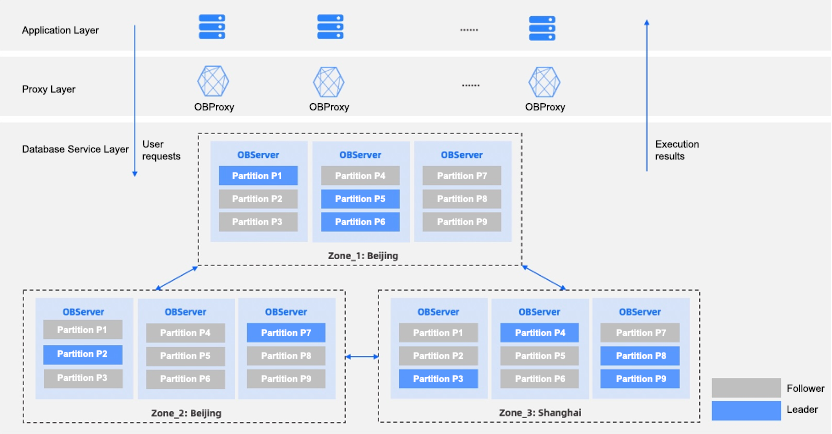
<style>
.page{position:relative;width:832px;height:434px;background:#f2f2f2}
.page>*{position:absolute;margin:0}
.t1{font:10px "ArialMT";color:#000000}
.t2{font:10px/12px "ArialMT";color:#000000}
.t3{font:9px/23px "Arial-BoldMT";color:#ffffff}
.t4{font:9px/24px "Arial-BoldMT";color:#ffffff}
</style>
<div class="page">
<p class="t1" style="left:22px;top:26px;width:77px;height:10px">Application Layer</p>
<p class="t1" style="left:22px;top:85px;width:54px;height:10px">Proxy Layer</p>
<p class="t1" style="left:194px;top:103px;width:41px;height:10px">OBProxy</p>
<p class="t1" style="left:309px;top:103px;width:41px;height:10px">OBProxy</p>
<p class="t1" style="left:525px;top:103px;width:41px;height:10px">OBProxy</p>
<p class="t1" style="left:22px;top:145px;width:107px;height:10px">Database Service Layer</p>
<p class="t2" style="left:142px;top:140px;width:39px;height:22px">User requests</p>
<p class="t2" style="left:655px;top:140px;width:44px;height:20px">Execution results</p>
<p class="t3" style="left:232px;top:172px;width:50px;height:53px;text-align:center">Partition P1<br>Partition P2<br>Partition P3</p>
<p class="t3" style="left:335px;top:172px;width:51px;height:53px;text-align:center">Partition P4<br>Partition P5<br>Partition P6</p>
<p class="t3" style="left:437px;top:172px;width:50px;height:53px;text-align:center">Partition P7<br>Partition P8<br>Partition P9</p>
<p class="t4" style="left:57px;top:326px;width:50px;height:55px;text-align:center">Partition P1<br>Partition P2<br>Partition P3</p>
<p class="t3" style="left:160px;top:329px;width:51px;height:53px;text-align:center">Partition P4<br>Partition P5<br>Partition P6</p>
<p class="t3" style="left:261px;top:329px;width:50px;height:53px;text-align:center">Partition P7<br>Partition P8<br>Partition P9</p>
<p class="t3" style="left:413px;top:329px;width:50px;height:53px;text-align:center">Partition P1<br>Partition P2<br>Partition P3</p>
<p class="t3" style="left:515px;top:329px;width:51px;height:53px;text-align:center">Partition P4<br>Partition P5<br>Partition P6</p>
<p class="t3" style="left:616px;top:329px;width:50px;height:53px;text-align:center">Partition P7<br>Partition P8<br>Partition P9</p>
<p class="t1" style="left:787px;top:384px;width:38px;height:8px">Follower</p>
<p class="t1" style="left:787px;top:405px;width:32px;height:8px">Leader</p>
</div>
